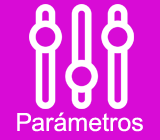
<style>
.page{position:relative;width:160px;height:140px;background:#d80bd6}
.page>*{position:absolute;margin:0}
.t1{font:25px "ArialMT";color:#ffffff}
</style>
<div class="page">
<p class="t1" style="left:17px;top:112px;width:126px;height:20px">Parámetros</p>
</div>
